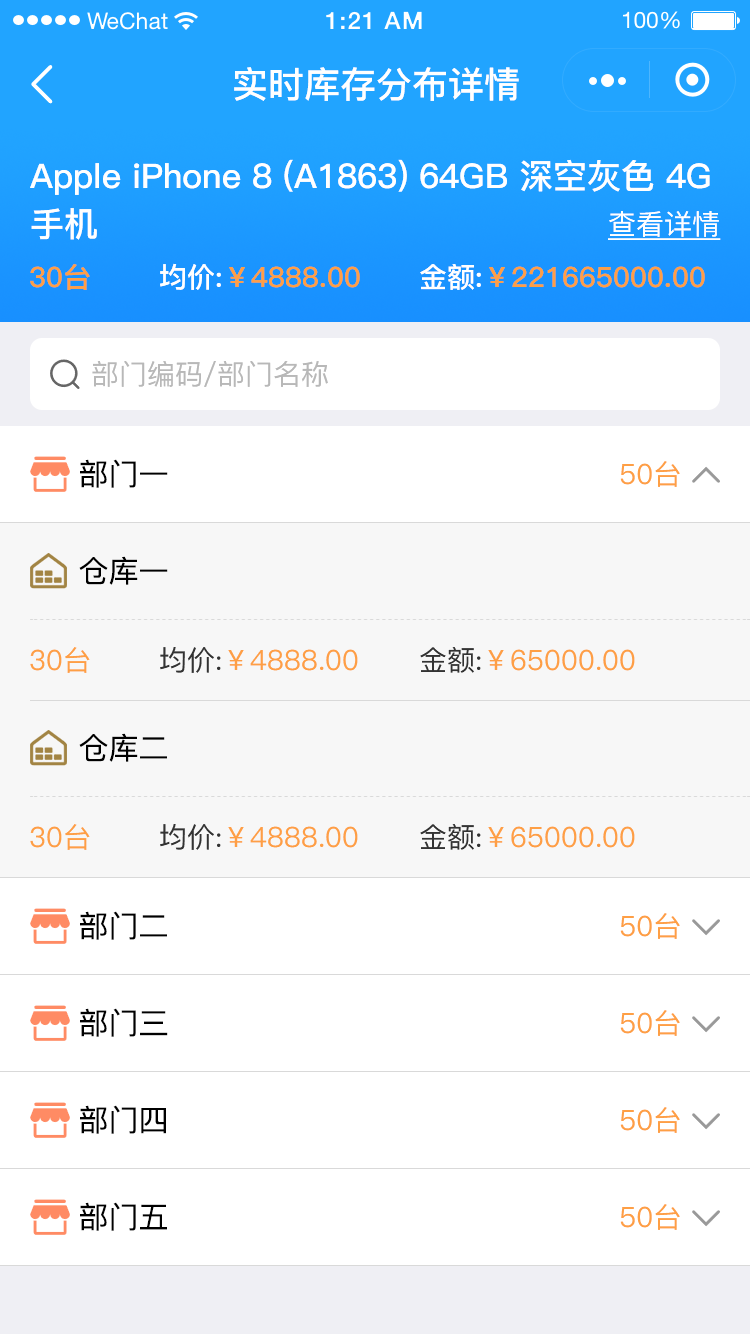
<style>
.page{position:relative;width:750px;height:1334px;background:#ffffff}
.page>*{position:absolute;margin:0}
.t1{font:36px "PingFang-SC-Bold";color:#ffffff}
.t2{font:34px/48px "PingFang-SC-Bold";color:#ffffff}
.t3{font:28px "PingFang-SC-Medium";color:#ffffff;text-decoration:underline}
.t4{font:28px "PingFang-SC-Bold";color:#fe9f45}
.t5{font:28px "PingFang-SC-Bold";color:#ffffff}
.t6{font:28px "PingFang-SC-Medium";color:#b8b8b8}
.t7{font:30px "PingFang-SC-Medium";color:#000000}
.t8{font:28px "PingFang-SC-Medium";color:#fe9f45}
.t9{font:28px "PingFang-SC-Medium";color:#333333}
</style>
<div class="page">
<p class="t1" style="left:234px;top:67px;width:285px;height:34px">实时库存分布详情</p>
<p class="t2" style="left:30px;top:159px;width:680px;height:81px">Apple iPhone 8 (A1863) 64GB 深空灰色 4G<br>手机</p>
<p class="t3" style="left:608px;top:211px;width:113px;height:29px">查看详情</p>
<p class="t4" style="left:30px;top:264px;width:60px;height:26px">30台</p>
<p class="t4" style="left:160px;top:263px;width:200px;height:27px"><span class="t5">均价:</span>￥4888.00</p>
<p class="t4" style="left:420px;top:264px;width:285px;height:26px"><span class="t5">金额:</span>￥221665000.00</p>
<p class="t6" style="left:92px;top:361px;width:236px;height:26px">部门编码/部门名称</p>
<p class="t7" style="left:80px;top:459px;width:88px;height:29px">部门一</p>
<p class="t8" style="left:620px;top:461px;width:60px;height:26px">50台</p>
<p class="t7" style="left:79px;top:556px;width:89px;height:29px">仓库一</p>
<p class="t8" style="left:30px;top:647px;width:60px;height:26px">30台</p>
<p class="t8" style="left:160px;top:647px;width:198px;height:26px"><span class="t9">均价:</span>￥4888.00</p>
<p class="t8" style="left:420px;top:647px;width:215px;height:26px"><span class="t9">金额:</span>￥65000.00</p>
<p class="t7" style="left:79px;top:733px;width:88px;height:29px">仓库二</p>
<p class="t8" style="left:30px;top:824px;width:60px;height:26px">30台</p>
<p class="t8" style="left:160px;top:824px;width:198px;height:26px"><span class="t9">均价:</span>￥4888.00</p>
<p class="t8" style="left:420px;top:824px;width:215px;height:26px"><span class="t9">金额:</span>￥65000.00</p>
<p class="t7" style="left:80px;top:911px;width:87px;height:29px">部门二</p>
<p class="t8" style="left:620px;top:913px;width:60px;height:26px">50台</p>
<p class="t7" style="left:80px;top:1008px;width:88px;height:29px">部门三</p>
<p class="t8" style="left:620px;top:1010px;width:60px;height:26px">50台</p>
<p class="t7" style="left:80px;top:1105px;width:86px;height:29px">部门四</p>
<p class="t8" style="left:620px;top:1107px;width:60px;height:26px">50台</p>
<p class="t7" style="left:80px;top:1202px;width:87px;height:29px">部门五</p>
<p class="t8" style="left:620px;top:1204px;width:60px;height:26px">50台</p>
</div>
